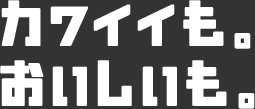
<style>
.page{position:relative;width:255px;height:109px;background:#333333}
.page>*{position:absolute;margin:0}
.t1{font:60px/60px "Nikkyou-Sans";letter-spacing:0.075em;color:#ffffff;font-weight:bold}
</style>
<div class="page">
<p class="t1" style="left:0px;top:0px;width:255px;height:109px">カワイイも。<br>おいしいも。</p>
</div>
